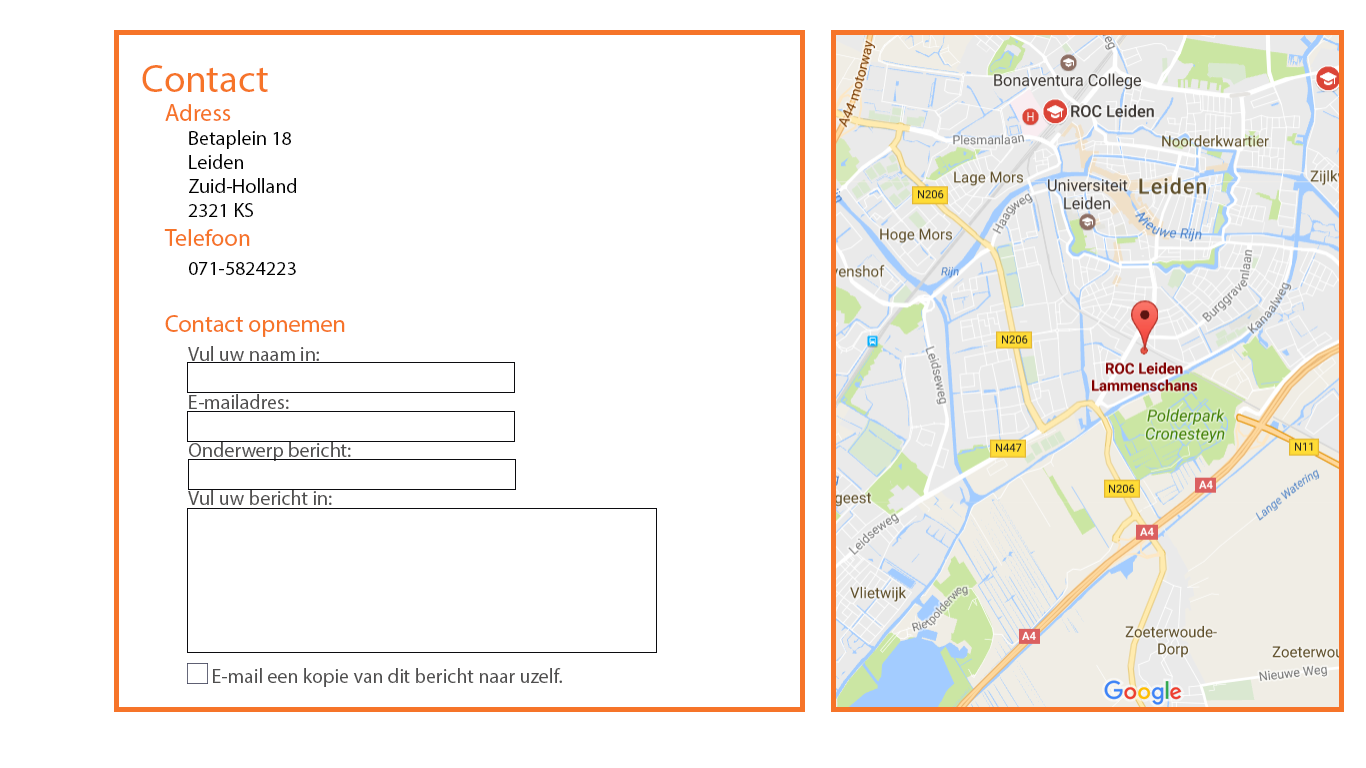
<style>
.page{position:relative;width:1366px;height:768px;background:#ffffff}
.page>*{position:absolute;margin:0}
.t1{font:20px "MyriadPro-Regular";color:#4f4e4e}
.t2{font:38.9px "MyriadPro-Regular";color:#f67429}
.t3{font:24px "MyriadPro-Regular";color:#f67429}
.t4{font:20px "MyriadPro-Regular";color:#000000}
</style>
<div class="page">
<p class="t1" style="left:142px;top:65px;width:420px;height:622px"><span class="t2">Contact</span><span class="t3"><br> Adress<br></span><span class="t4">  Betaplein 18<br>  Leiden<br>  Zuid-Holland<br>  2321 KS<br></span><span class="t3"> Telefoon<br>  </span><span class="t4">071-5824223<br></span><span class="t3"><br> Contact opnemen<br>   </span>Vul uw naam in:<br><br>   E-mailadres:<br><br>   Onderwerp bericht:<br><br>   Vul uw bericht in:<br><br><br><br><br><br><br><br><br>   E-mail een kopie van dit bericht naar uzelf.</p>
</div>
